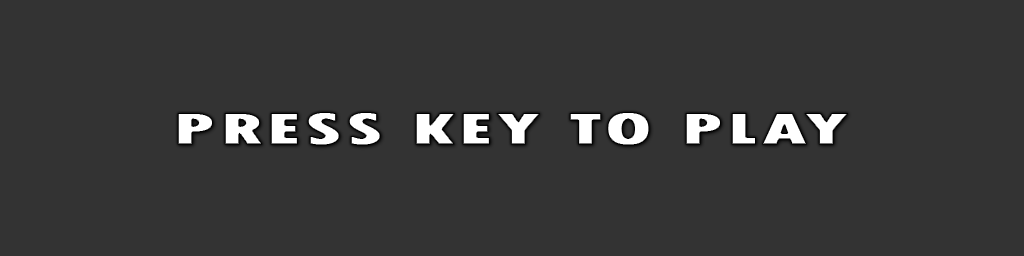
<style>
.page{position:relative;width:1024px;height:256px;background:#333333}
.page>*{position:absolute;margin:0}
.t1{font:48px "TwCenMT-CondensedExtraBold";letter-spacing:0.025em;color:#ffffff;font-weight:bold;scale:1.73 1}
</style>
<div class="page">
<p class="t1" style="left:177px;top:112px;width:671px;height:34px">PRESS KEY TO PLAY</p>
</div>
